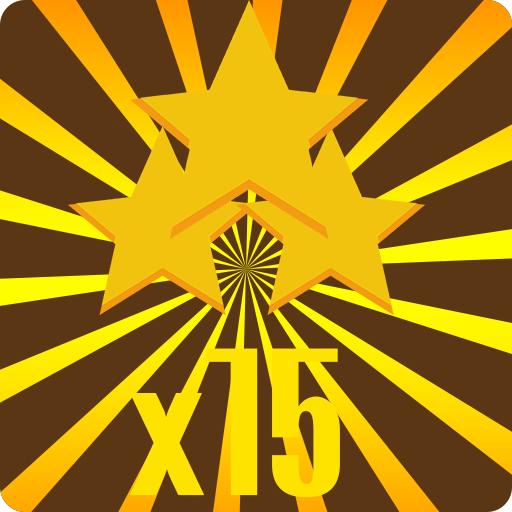
<style>
.page{position:relative;width:512px;height:512px;background:#5a3614}
.page>*{position:absolute;margin:0}
.t1{font:208.3px "BluefishDemo-Bold";color:#ffe400}
</style>
<div class="page">
<p class="t1" style="left:130px;top:348px;width:210px;height:150px">x15</p>
</div>
